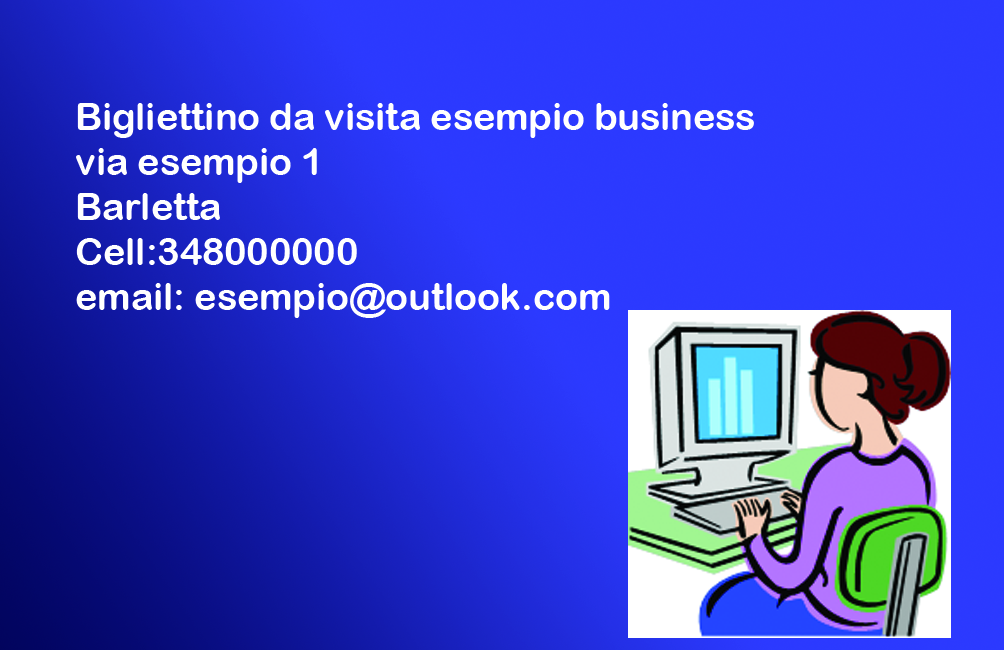
<style>
.page{position:relative;width:1004px;height:650px}
.page>*{position:absolute;margin:0}
.t1{font:37.5px "ArialRoundedMTBold";color:#ffffff}
</style>
<div class="page">
<p class="t1" style="left:76px;top:103px;width:678px;height:215px">Bigliettino da visita esempio business<br>via esempio 1<br>Barletta<br>Cell:348000000<br>email: esempio@outlook.com</p>
</div>
